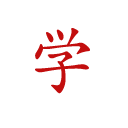
<style>
.page{position:relative;width:128px;height:128px;background:#ffffff}
.page>*{position:absolute;margin:0}
.t1{font:72px "STKaiti";color:#c20e0e}
</style>
<div class="page">
<p class="t1" style="left:35px;top:28px;width:55px;height:66px">学</p>
</div>
